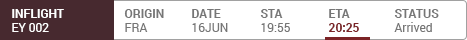
<style>
.page{position:relative;width:467px;height:40px;background:#ffffff}
.page>*{position:absolute;margin:0}
.t1{font:12px "Roboto-Bold";color:#ffffff;text-transform:uppercase}
.t2{font:12px "Roboto-Regular";color:#ffffff;text-transform:uppercase}
.t3{font:12px "Roboto-Bold";color:#767676;text-transform:uppercase}
.t4{font:12px "Roboto-Regular";color:#767676;text-transform:uppercase}
.t5{font:11.9px "Roboto-Bold";color:#7b2326;text-transform:uppercase}
.t6{font:11.9px "Roboto-Bold";color:#767676;text-transform:uppercase}
.t7{font:12px "Roboto-Regular";color:#767676}
</style>
<div class="page">
<p class="t1" style="left:12px;top:9px;width:52px;height:23px">Inflight<br><span class="t2">EY 002</span></p>
<p class="t3" style="left:124px;top:9px;width:40px;height:23px">Origin<br><span class="t4">fra</span></p>
<p class="t4" style="left:192px;top:9px;width:36px;height:23px"><span class="t3">Date<br></span>16Jun</p>
<p class="t4" style="left:260px;top:9px;width:30px;height:23px"><span class="t3">STA<br></span>19:55</p>
<p class="t5" style="left:329px;top:9px;width:30px;height:23px"><span class="t6">ETA<br></span>20:25</p>
<p class="t7" style="left:394px;top:9px;width:45px;height:23px"><span class="t3">Status<br></span>Arrived</p>
</div>
